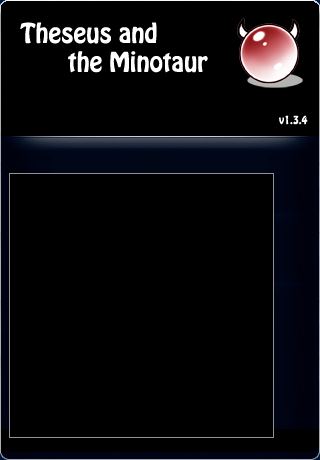
<style>
.page{position:relative;width:320px;height:460px;background:#000000}
.page>*{position:absolute;margin:0}
.t1{font:24px "HoboStd";color:#ffffff}
.t2{font:10px "HoboStd";color:#ffffff}
</style>
<div class="page">
<p class="t1" style="left:20px;top:22px;width:188px;height:51px;text-align:center">Theseus and<br>              the Minotaur</p>
<p class="t2" style="left:279px;top:115px;width:29px;height:10px">v1.3.4</p>
</div>
